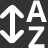
<style>
.page{position:relative;width:48px;height:48px;background:#333333}
.page>*{position:absolute;margin:0}
.t1{font:30px/26px "OpenSans-Bold";color:#ffffff}
</style>
<div class="page">
<p class="t1" style="left:26px;top:0px;width:21px;height:48px;text-align:center">A<br>Z</p>
</div>
